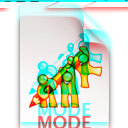
<style>
.page{position:relative;width:128px;height:128px}
.page>*{position:absolute;margin:0}
.t1{font:18px "LucidaGrande-Bold";letter-spacing:-0.02em}
</style>
<div class="page">
<p class="t1" style="left:38px;top:100px;width:53px;height:15px">MODE</p>
</div>
